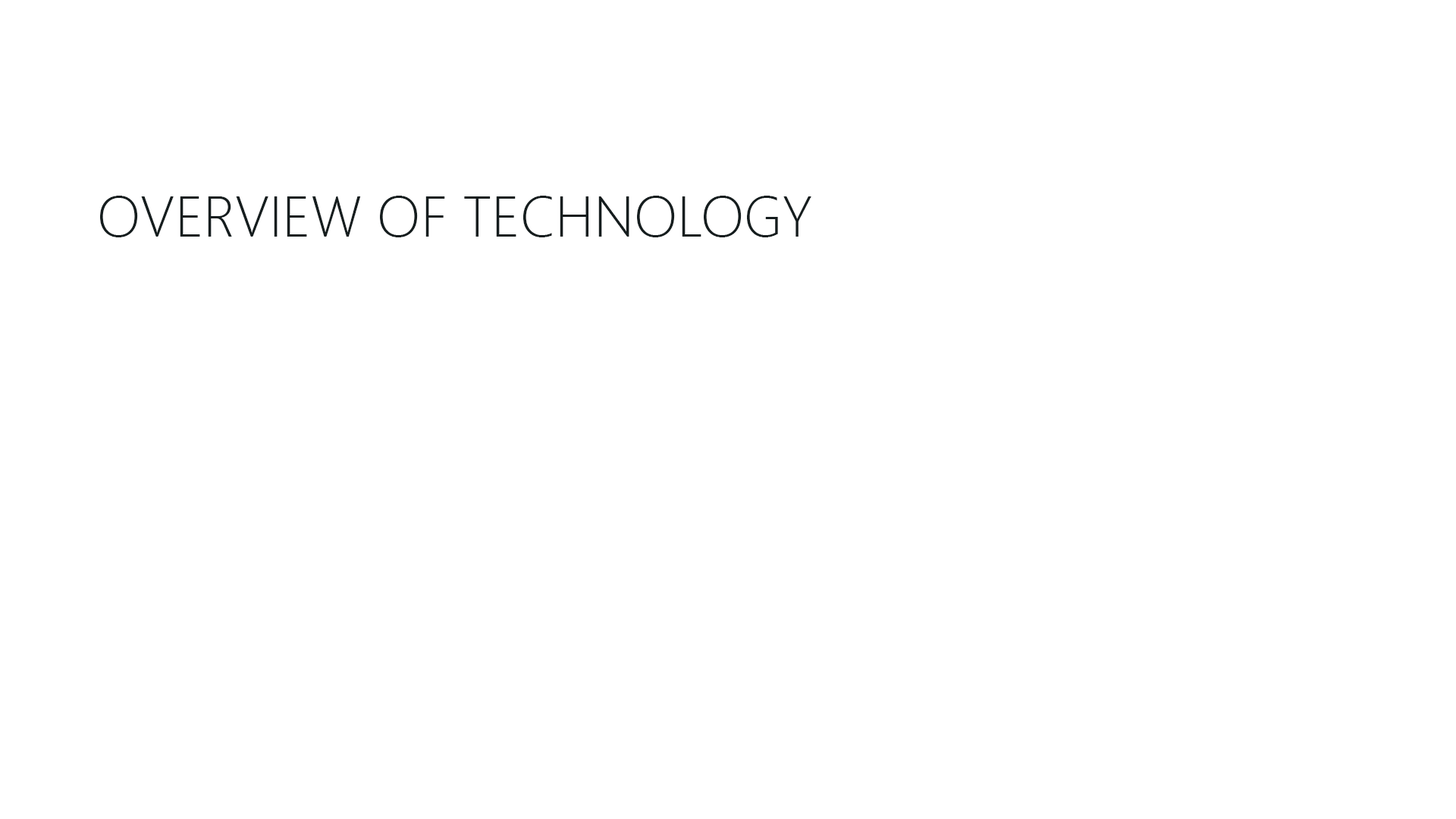
<style>
.page{position:relative;width:1456px;height:819px;background:#ffffff}
.page>*{position:absolute;margin:0}
.t1{font:56.9px "SegoeUI-Light";color:#151d1e}
</style>
<div class="page">
<p class="t1" style="left:100px;top:196px;width:711px;height:41px">OVERVIEW OF TECHNOLOGY</p>
</div>
